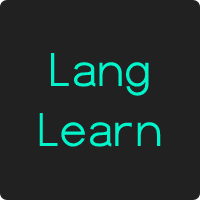
<style>
.page{position:relative;width:200px;height:200px;background:#212121}
.page>*{position:absolute;margin:0}
.t1{font:50px "Dustismo";color:#00f5cb}
</style>
<div class="page">
<p class="t1" style="left:39px;top:53px;width:122px;height:94px;text-align:center">Lang<br>Learn</p>
</div>
